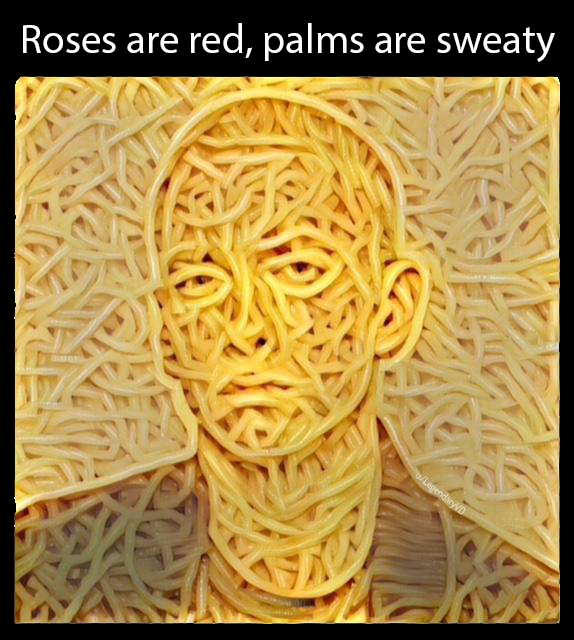
<style>
.page{position:relative;width:574px;height:640px}
.page>*{position:absolute;margin:0}
.t1{font:41px "MyriadPro-Regular";color:#ffffff}
</style>
<div class="page">
<p class="t1" style="left:23px;top:23px;width:532px;height:39px">Roses are red, palms are sweaty</p>
</div>
